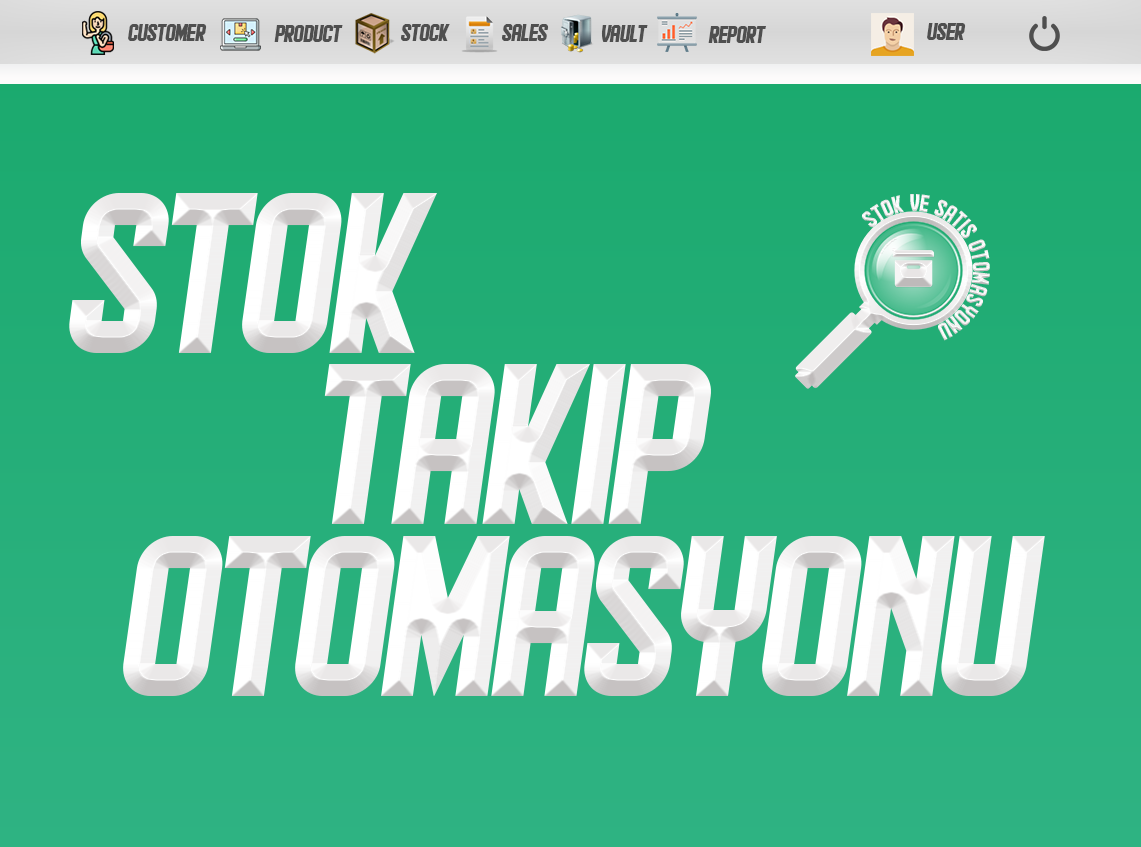
<style>
.page{position:relative;width:1141px;height:847px}
.page>*{position:absolute;margin:0}
.t1{font:25px "Hindenburg-Italic";letter-spacing:-0.03em;color:#4f4f4f}
.t2{font:234.8px "Hindenburg-Italic";letter-spacing:-0.03em;color:#f1f0f0}
.t3{font:25px "Hindenburg-Regular";letter-spacing:-0.03em;color:#f2f1f1}
.t4{font:234.8px "Hindenburg-Italic";letter-spacing:-0.03em;color:#f1f1f1}
</style>
<div class="page">
<p class="t1" style="left:128px;top:24px;width:79px;height:17px">CUSTOMER</p>
<p class="t1" style="left:274px;top:25px;width:69px;height:17px">PRODUCT</p>
<p class="t1" style="left:401px;top:24px;width:49px;height:17px">STOCK</p>
<p class="t1" style="left:502px;top:24px;width:47px;height:17px">sales</p>
<p class="t1" style="left:601px;top:25px;width:47px;height:17px">VAULT</p>
<p class="t1" style="left:708px;top:26px;width:58px;height:17px">report</p>
<p class="t1" style="left:927px;top:23px;width:39px;height:17px">user</p>
<p class="t2" style="left:69px;top:193px;width:368px;height:160px">STOK</p>
<p class="t3" style="left:861px;top:194px;width:129px;height:147px">stok ve satis otomasyonu</p>
<p class="t4" style="left:324px;top:364px;width:387px;height:160px">TAKIP</p>
<p class="t2" style="left:123px;top:536px;width:922px;height:160px">OTOMASYONU</p>
</div>
